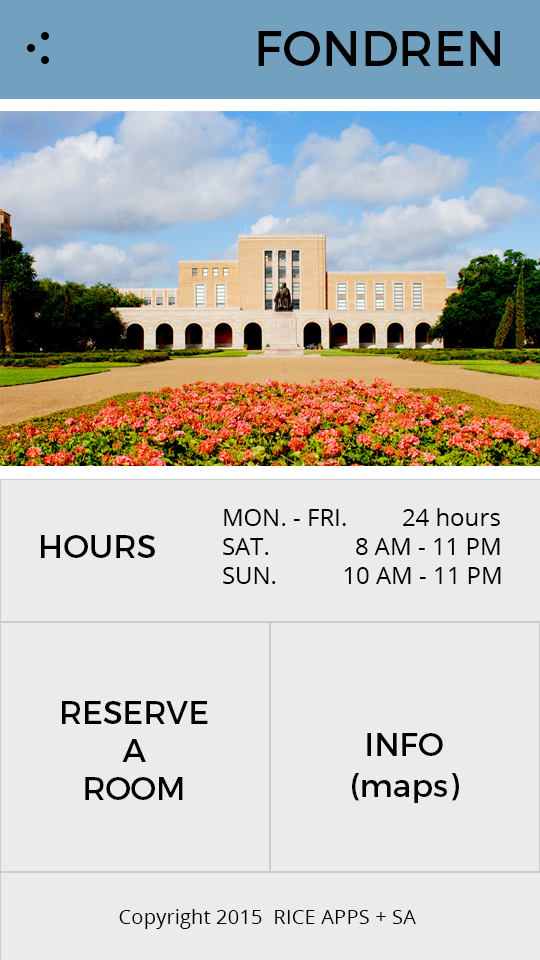
<style>
.page{position:relative;width:540px;height:960px;background:#ebebeb}
.page>*{position:absolute;margin:0}
.t1{font:48.8px "Montserrat-Regular";color:#000000}
.t2{font:24px "OpenSans";color:#000000}
.t3{font:31.8px "Montserrat-Regular";color:#000000}
.t4{font:20.4px "OpenSans";color:#000000}
</style>
<div class="page">
<p class="t1" style="left:258px;top:31px;width:242px;height:35px">FONDREN</p>
<p class="t2" style="left:223px;top:508px;width:278px;height:76px">MON. - FRI.   24 hours<br>SAT.       8 AM - 11 PM<br>SUN.     10 AM - 11 PM</p>
<p class="t3" style="left:41px;top:535px;width:114px;height:23px">HOURS</p>
<p class="t3" style="left:62px;top:701px;width:146px;height:99px;text-align:center">RESERVE<br>A<br>ROOM</p>
<p class="t3" style="left:367px;top:733px;width:76px;height:23px">INFO</p>
<p class="t3" style="left:352px;top:773px;width:107px;height:30px">(maps)</p>
<p class="t4" style="left:119px;top:909px;width:297px;height:20px">Copyright 2015  RICE APPS + SA</p>
</div>
